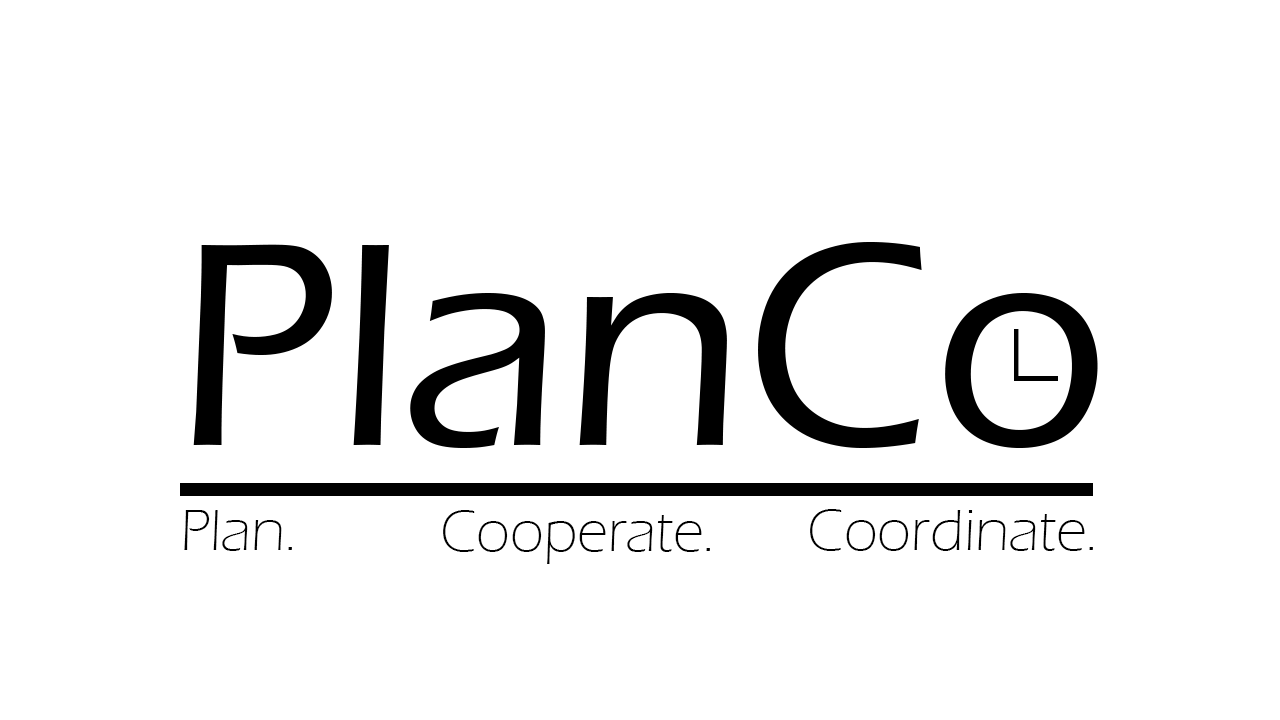
<style>
.page{position:relative;width:1280px;height:720px;background:#ffffff}
.page>*{position:absolute;margin:0}
.t1{font:60px "ErasITC-Light";color:#000000}
</style>
<div class="page">
<p class="t1" style="left:184px;top:510px;width:108px;height:41px">Plan.</p>
<p class="t1" style="left:443px;top:510px;width:267px;height:54px">Cooperate.</p>
<p class="t1" style="left:810px;top:509px;width:283px;height:42px">Coordinate.</p>
</div>
